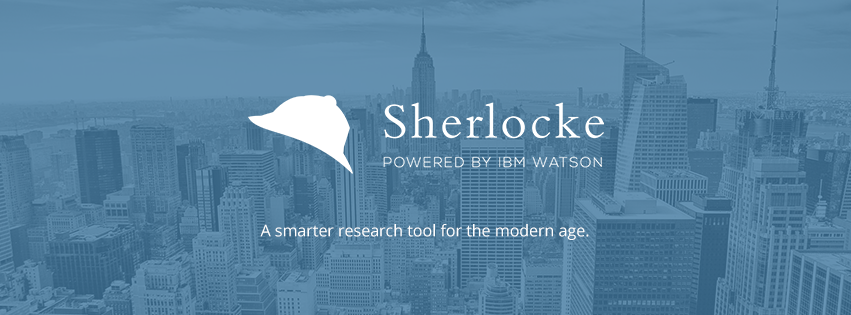
<style>
.page{position:relative;width:851px;height:315px}
.page>*{position:absolute;margin:0}
.t1{font:16px "OpenSans";color:#ffffff}
</style>
<div class="page">
<p class="t1" style="left:260px;top:224px;width:329px;height:16px">A smarter research tool for the modern age.</p>
</div>
